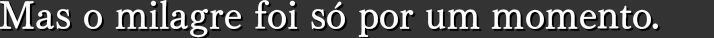
<style>
.page{position:relative;width:714px;height:38px;background:#333333}
.page>*{position:absolute;margin:0}
.t1{font:38.7px "TelopMinPro-D";color:#ffffff}
</style>
<div class="page">
<p class="t1" style="left:0px;top:0px;width:658px;height:38px">Mas o milagre foi só por um momento.</p>
</div>
